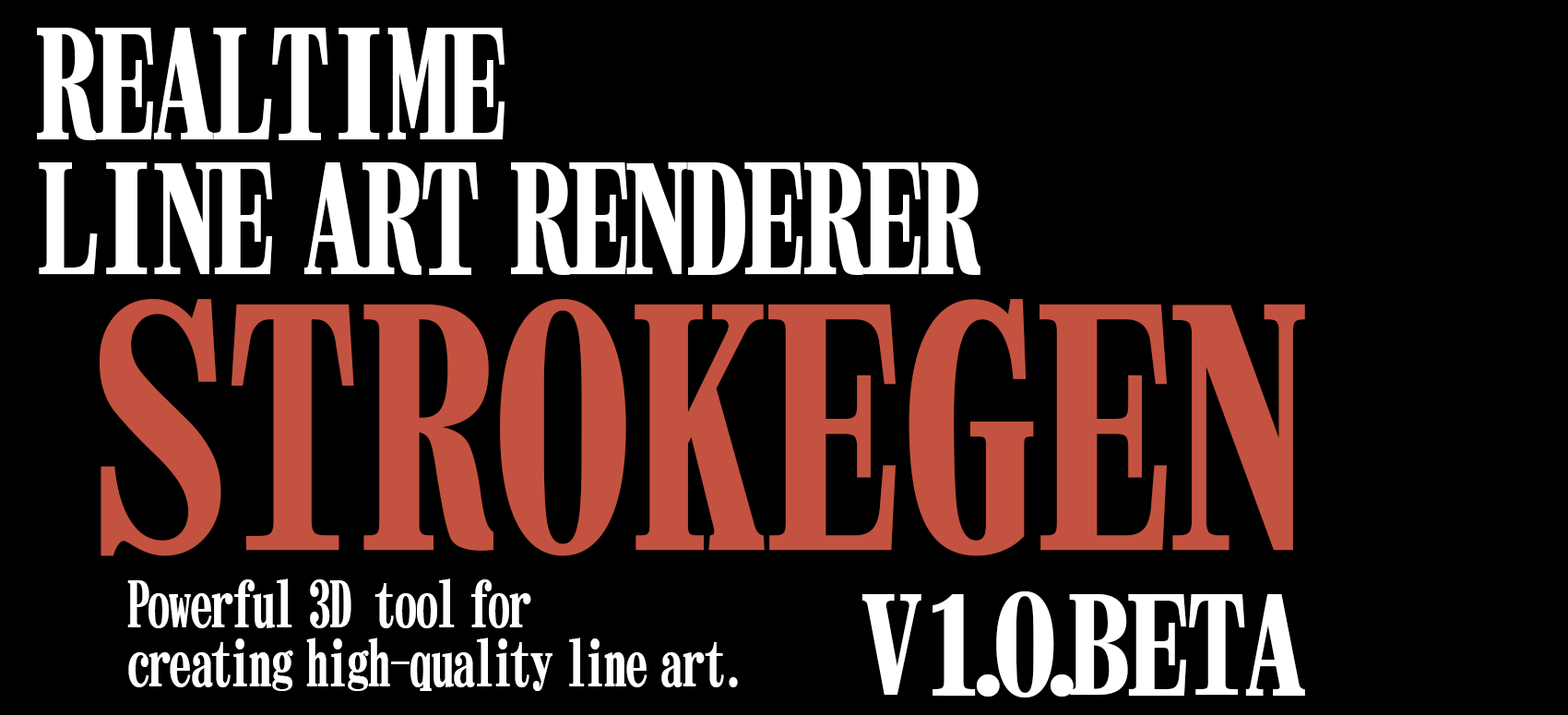
<style>
.page{position:relative;width:1568px;height:715px;background:#000000}
.page>*{position:absolute;margin:0}
.t1{font:135.3px "NIS-M9-83pv-RKSJ-H";letter-spacing:-0.023em;color:#ffffff;scale:0.91 1}
.t2{font:297.6px "NIS-M9-83pv-RKSJ-H";color:#c35340;scale:0.91 1}
.t3{font:57.6px/59px "NIS-M9-83pv-RKSJ-H";color:#ffffff;scale:0.77 1}
.t4{font:123px "NIS-M9-83pv-RKSJ-H";letter-spacing:-0.2em;color:#ffffff}
.t5{font:123px "NIS-M9-83pv-RKSJ-H";letter-spacing:-0.01em;color:#ffffff}
.t6{font:123px "NIS-M9-83pv-RKSJ-H";letter-spacing:-0.023em;color:#ffffff}
</style>
<div class="page">
<p class="t1" style="left:37px;top:28px;width:468px;height:112px">REALTIME</p>
<p class="t1" style="left:39px;top:162px;width:941px;height:113px">LINE ART RENDERER</p>
<p class="t2" style="left:100px;top:299px;width:1205px;height:257px">STROKEGEN</p>
<p class="t3" style="left:127px;top:578px;width:611px;height:113px">Powerful 3D tool for <br>creating high-quality line art.</p>
<p class="t4" style="left:861px;top:591px;width:444px;height:106px"><span class="t5">V</span>1.0.<span class="t6">BETA</span></p>
</div>
